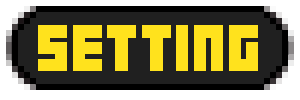
<style>
.page{position:relative;width:300px;height:100px;background:#202020}
.page>*{position:absolute;margin:0}
.t1{font:58px "04b19";letter-spacing:0.025em;color:#ffe21d}
</style>
<div class="page">
<p class="t1" style="left:38px;top:25px;width:220px;height:46px">SETTING</p>
</div>
